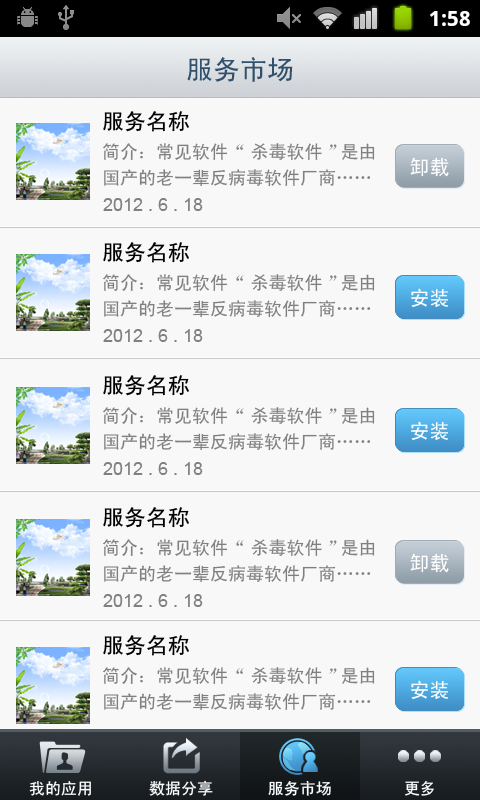
<style>
.page{position:relative;width:480px;height:800px;background:#f8f8f8}
.page>*{position:absolute;margin:0}
.t1{font:27px "SimHei";color:#30506c}
.t2{font:22px "SimHei";color:#000000}
.t3{font:18px/26px "SimHei";color:#808080}
.t4{font:20px "SimHei";color:#ffffff}
.t5{font:18px "ArialMT";color:#808080}
.t6{font:16px "SimHei";color:#ffffff}
</style>
<div class="page">
<p class="t1" style="left:187px;top:57px;width:106px;height:25px">服务市场</p>
<p class="t2" style="left:103px;top:111px;width:86px;height:21px">服务名称</p>
<p class="t3" style="left:103px;top:143px;width:272px;height:44px">简介：常见软件 “杀毒软件”是由<br>国产的老一辈反病毒软件厂商……</p>
<p class="t4" style="left:410px;top:157px;width:39px;height:20px">卸载</p>
<p class="t5" style="left:103px;top:198px;width:100px;height:13px">2012 . 6 . 18</p>
<p class="t2" style="left:103px;top:242px;width:86px;height:21px">服务名称</p>
<p class="t3" style="left:103px;top:274px;width:272px;height:44px">简介：常见软件 “杀毒软件”是由<br>国产的老一辈反病毒软件厂商……</p>
<p class="t4" style="left:411px;top:288px;width:37px;height:19px">安装</p>
<p class="t5" style="left:103px;top:329px;width:100px;height:13px">2012 . 6 . 18</p>
<p class="t2" style="left:103px;top:375px;width:86px;height:21px">服务名称</p>
<p class="t3" style="left:103px;top:407px;width:272px;height:44px">简介：常见软件 “杀毒软件”是由<br>国产的老一辈反病毒软件厂商……</p>
<p class="t4" style="left:411px;top:421px;width:37px;height:19px">安装</p>
<p class="t5" style="left:103px;top:462px;width:100px;height:13px">2012 . 6 . 18</p>
<p class="t2" style="left:103px;top:507px;width:86px;height:21px">服务名称</p>
<p class="t3" style="left:103px;top:539px;width:272px;height:44px">简介：常见软件 “杀毒软件”是由<br>国产的老一辈反病毒软件厂商……</p>
<p class="t4" style="left:410px;top:553px;width:39px;height:20px">卸载</p>
<p class="t5" style="left:103px;top:594px;width:100px;height:13px">2012 . 6 . 18</p>
<p class="t2" style="left:103px;top:635px;width:86px;height:21px">服务名称</p>
<p class="t3" style="left:103px;top:667px;width:272px;height:44px">简介：常见软件 “杀毒软件”是由<br>国产的老一辈反病毒软件厂商……</p>
<p class="t4" style="left:411px;top:680px;width:37px;height:19px">安装</p>
<p class="t6" style="left:29px;top:781px;width:62px;height:15px">我的应用</p>
<p class="t6" style="left:149px;top:780px;width:64px;height:16px">数据分享</p>
<p class="t6" style="left:268px;top:780px;width:63px;height:16px">服务市场</p>
<p class="t6" style="left:405px;top:780px;width:29px;height:16px">更多</p>
</div>
